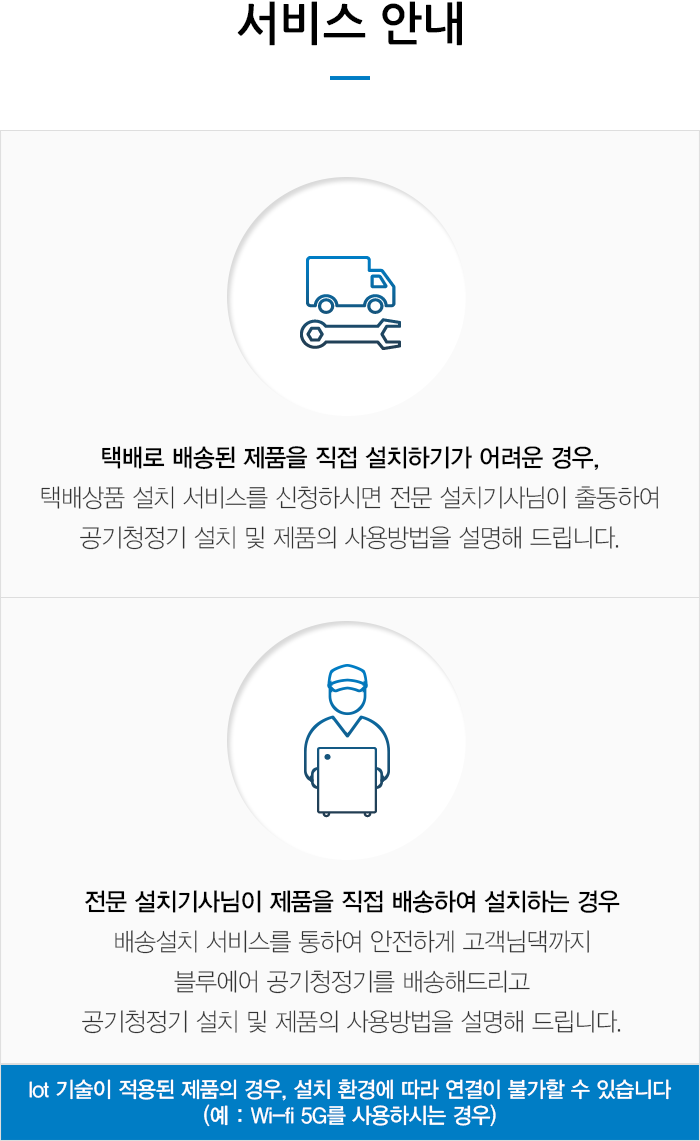
<style>
.page{position:relative;width:700px;height:1141px;background:#fafafa}
.page>*{position:absolute;margin:0}
.t1{font:46px "NanumGothicBold";color:#000000}
.t2{font:25px/40px "YDVYGO31";letter-spacing:-0.025em;color:#333333;scale:0.95 1}
.t3{font:25px/40px "YDVYGO33";letter-spacing:-0.025em;color:#000000;scale:0.95 1}
.t4{font:22px/26px "YDVYGO33";letter-spacing:-0.025em;color:#ffffff;scale:0.95 1}
</style>
<div class="page">
<p class="t1" style="left:237px;top:1px;width:225px;height:45px">서비스 안내</p>
<p class="t2" style="left:41px;top:446px;width:617px;height:104px;text-align:center"><span class="t3">택배로 배송된 제품을 직접 설치하기가 어려운 경우,<br></span>택배상품 설치 서비스를 신청하시면 전문 설치기사님이 출동하여<br>공기청정기 설치 및 제품의 사용방법을 설명해 드립니다.</p>
<p class="t2" style="left:82px;top:890px;width:539px;height:144px;text-align:center"><span class="t3">전문 설치기사님이 제품을 직접 배송하여 설치하는 경우<br></span>배송설치 서비스를 통하여 안전하게 고객님댁까지<br>블루에어 공기청정기를 배송해드리고<br>공기청정기 설치 및 제품의 사용방법을 설명해 드립니다.</p>
<p class="t4" style="left:29px;top:1079px;width:643px;height:48px;text-align:center">Iot 기술이 적용된 제품의 경우, 설치 환경에 따라 연결이 불가할 수 있습니다<br>(예 : Wi-fi 5G를 사용하시는 경우)</p>
</div>
